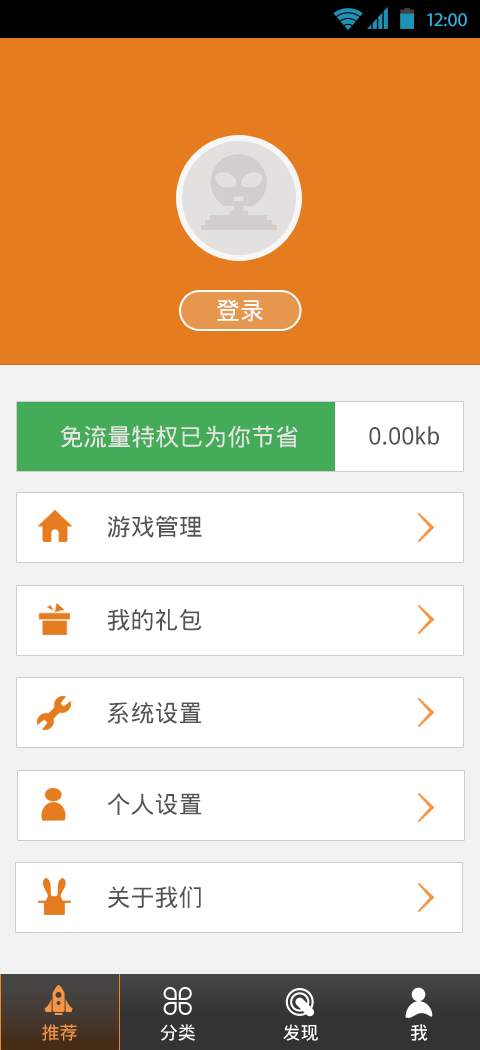
<style>
.page{position:relative;width:480px;height:1050px;background:#ffffff}
.page>*{position:absolute;margin:0}
.t1{font:19.4px "MyriadPro-Regular";color:#33b5e5}
.t2{font:24px "DroidSansFallback";color:#ffffff}
.t3{font:24px "DroidSansFallback";color:#e4e4e4}
.t4{font:24px "DroidSansFallback";color:#535353}
.t5{font:18px "DroidSansFallback";color:#f49643}
.t6{font:18px "DroidSansFallback";color:#ffffff}
</style>
<div class="page">
<p class="t1" style="left:427px;top:13px;width:40px;height:14px">12:00</p>
<p class="t2" style="left:217px;top:299px;width:46px;height:23px">登录</p>
<p class="t3" style="left:60px;top:425px;width:238px;height:23px">免流量特权已为你节省</p>
<p class="t4" style="left:369px;top:426px;width:70px;height:19px">0.00kb</p>
<p class="t4" style="left:107px;top:515px;width:95px;height:23px">游戏管理</p>
<p class="t4" style="left:107px;top:609px;width:95px;height:22px">我的礼包</p>
<p class="t4" style="left:107px;top:702px;width:95px;height:22px">系统设置</p>
<p class="t4" style="left:107px;top:793px;width:95px;height:22px">个人设置</p>
<p class="t4" style="left:108px;top:886px;width:93px;height:22px">关于我们</p>
<p class="t5" style="left:42px;top:1024px;width:35px;height:17px">推荐</p>
<p class="t6" style="left:160px;top:1024px;width:35px;height:17px">分类</p>
<p class="t6" style="left:283px;top:1024px;width:35px;height:17px">发现</p>
<p class="t6" style="left:411px;top:1024px;width:17px;height:17px">我</p>
</div>
